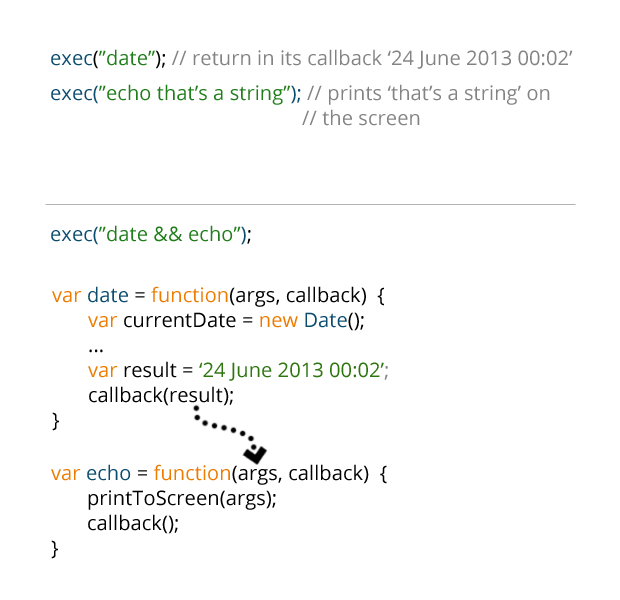
<style>
.page{position:relative;width:620px;height:600px;background:#ffffff}
.page>*{position:absolute;margin:0}
.t1{font:20px "OpenSans";letter-spacing:0.005em;color:#838383}
.t2{font:20px "OpenSans";letter-spacing:0.005em;color:#0b4c6e}
.t3{font:20px "OpenSans";letter-spacing:0.005em;color:#000000}
.t4{font:20px "OpenSans";letter-spacing:0.005em;color:#1f7d1a}
.t5{font:20px/25px "OpenSans";letter-spacing:0.005em;color:#838383}
.t6{font:20px/25px "OpenSans";letter-spacing:0.005em;color:#0b4c6e}
.t7{font:20px/25px "OpenSans";letter-spacing:0.005em;color:#1f7d1a}
.t8{font:20px/25px "OpenSans";letter-spacing:0.005em;color:#2c750f}
.t9{font:20px/25px "OpenSans";letter-spacing:0.005em;color:#ec7b00}
.t10{font:20px/25px "OpenSans";letter-spacing:0.005em;color:#000000}
</style>
<div class="page">
<p class="t1" style="left:51px;top:49px;width:522px;height:20px"><span class="t2">exec</span><span class="t3">(</span><span class="t4">”date”</span><span class="t3">); </span>// return in its callback ‘24 June 2013 00:02’</p>
<p class="t5" style="left:51px;top:84px;width:499px;height:42px"><span class="t6">exec(</span><span class="t7">”echo that’s a string”</span><span class="t6">); </span>// prints ‘that’s a string’ on<br>       // the screen</p>
<p class="t4" style="left:51px;top:225px;width:200px;height:20px"><span class="t2">exec(</span>”date &amp;&amp; echo”<span class="t2">)</span><span class="t3">;</span></p>
<p class="t8" style="left:52px;top:286px;width:336px;height:145px"><span class="t9">var </span><span class="t6">date</span><span class="t10"> = </span><span class="t9">function</span><span class="t10">(args, callback)  {<br> </span><span class="t9">var</span><span class="t10"> currentDate = </span><span class="t9">new </span><span class="t6">Date</span><span class="t10">();<br> ...<br> </span><span class="t9">var</span><span class="t10"> result = </span>‘24 June 2013 00:02’<span class="t5">;<br></span><span class="t10"> callback(result);<br>}</span></p>
<p class="t10" style="left:51px;top:464px;width:336px;height:95px"><span class="t9">var </span><span class="t6">echo</span> = <span class="t9">function</span>(args, callback)  {<br> printToScreen(args);<br> callback();<br>}</p>
</div>
